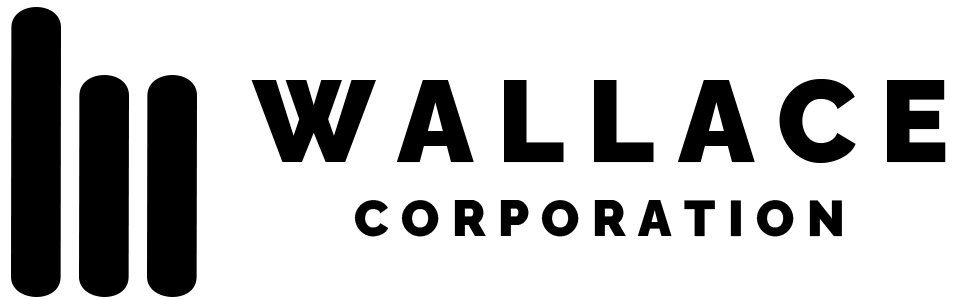
<style>
.page{position:relative;width:975px;height:300px;background:#ffffff}
.page>*{position:absolute;margin:0}
.t1{font:115px "RalewayRoman-Black";letter-spacing:0.2em;color:#000000}
.t2{font:50px "RalewayRoman-Black";letter-spacing:0.25em;color:#000000}
</style>
<div class="page">
<p class="t1" style="left:251px;top:79px;width:695px;height:84px">WALLACE</p>
<p class="t2" style="left:354px;top:200px;width:488px;height:37px">CORPORATION</p>
</div>
